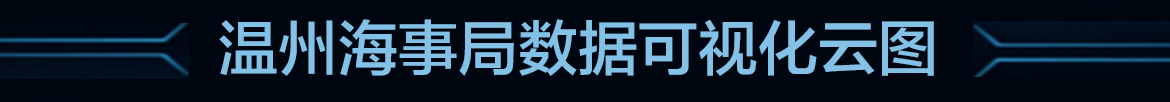
<style>
.page{position:relative;width:1170px;height:102px;background:#000610}
.page>*{position:absolute;margin:0}
.t1{font:60px "FZLTZHK--GBK1-0";color:#84c1e7}
</style>
<div class="page">
<p class="t1" style="left:219px;top:19px;width:715px;height:57px">温州海事局数据可视化云图</p>
</div>
